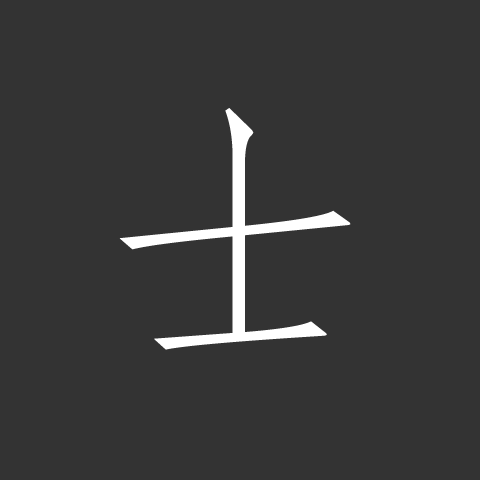
<style>
.page{position:relative;width:480px;height:480px;background:#333333}
.page>*{position:absolute;margin:0}
.t1{font:288px "STFangsong";color:#ffffff}
</style>
<div class="page">
<p class="t1" style="left:119px;top:108px;width:232px;height:242px">士</p>
</div>
